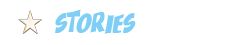
<style>
.page{position:relative;width:250px;height:45px;background:#ffffff}
.page>*{position:absolute;margin:0}
.t1{font:30px "HoustonComicsPersonalUse";color:#7ecef6}
</style>
<div class="page">
<p class="t1" style="left:55px;top:9px;width:81px;height:25px">STORIES</p>
</div>
